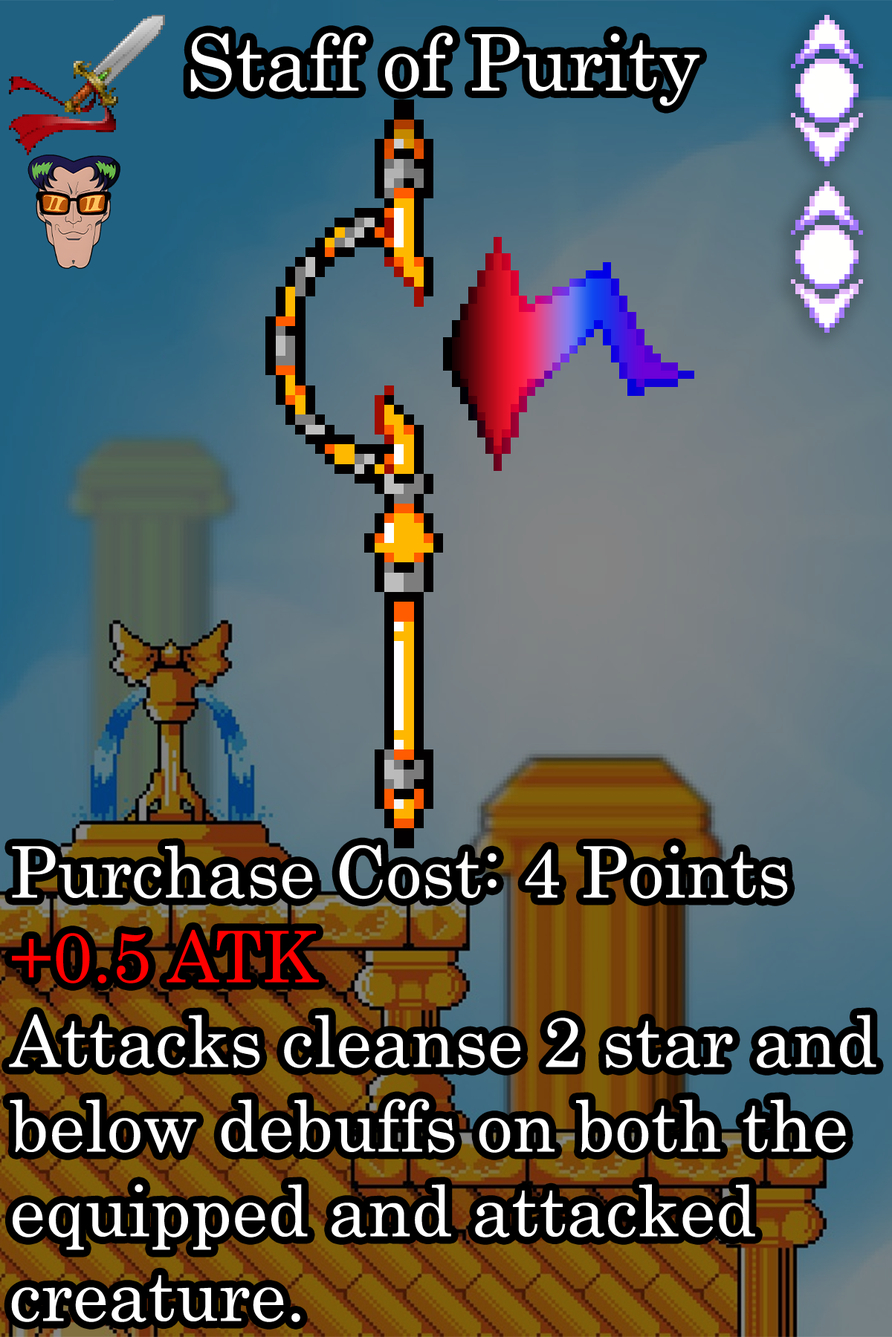
<style>
.page{position:relative;width:892px;height:1337px}
.page>*{position:absolute;margin:0}
.t1{font:133.7px "Century";color:#ffffff}
.t2{font:121.9px/84.7px "Century";color:#ffffff}
.t3{font:121.9px/84.7px "Century";color:#fefefe}
.t4{font:121.9px/84.7px "Century";color:#ff0000}
</style>
<div class="page">
<p class="t1" style="left:190px;top:33px;width:509px;height:73px">Staff of Purity</p>
<p class="t2" style="left:9px;top:845px;width:867px;height:478px"><span class="t3">Purchase Cost: 4 Points<br></span><span class="t4">+0.5 ATK<br></span>Attacks cleanse 2 star and below debuffs on both the equipped and attacked creature.</p>
</div>
